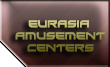
<style>
.page{position:relative;width:110px;height:67px}
.page>*{position:absolute;margin:0}
.t1{font:10px "Xirod-Regular";scale:0.96 1}
.t2{font:9.1px "Xirod-Regular";scale:0.96 1}
</style>
<div class="page">
<p class="t1" style="left:15px;top:20px;width:90px;height:32px"><span class="t2">        </span>EURASIA <br>    AMUSEMENT <br>       CENTERS</p>
</div>
